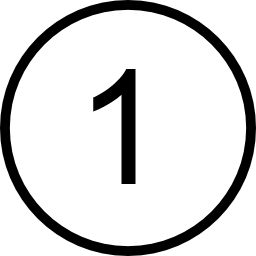
<style>
.page{position:relative;width:256px;height:256px;background:#ffffff}
.page>*{position:absolute;margin:0}
.t1{font:160px "ArialMT";color:#000000}
.t2{font:36px "FangSong";color:#3c3737}
</style>
<div class="page">
<p class="t1" style="left:93px;top:69px;width:43px;height:115px"><span class="t2"><br></span>1</p>
</div>
